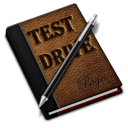
<style>
.page{position:relative;width:128px;height:128px;background:#ffffff}
.page>*{position:absolute;margin:0}
.t1{font:21.9px "Algerian";color:#190a01;scale:0.91 1}
</style>
<div class="page">
<p class="t1" style="left:27px;top:15px;width:70px;height:55px;rotate:-21deg">Test<br>Drive</p>
</div>
